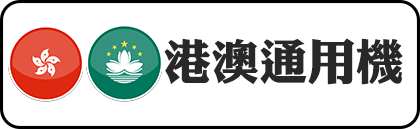
<style>
.page{position:relative;width:420px;height:129px;background:#ffffff}
.page>*{position:absolute;margin:0}
.t1{font:47.9px "DFLiKingHei-W8-WIN-BF";color:#282828}
</style>
<div class="page">
<p class="t1" style="left:164px;top:38px;width:239px;height:47px">港澳通用機</p>
</div>
